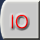
<style>
.page{position:relative;width:40px;height:40px;background:#c8c8c8}
.page>*{position:absolute;margin:0}
.t1{font:18px "MyungjoXB-HM";color:#fb0000}
</style>
<div class="page">
<p class="t1" style="left:10px;top:14px;width:28px;height:19px">IO</p>
</div>
